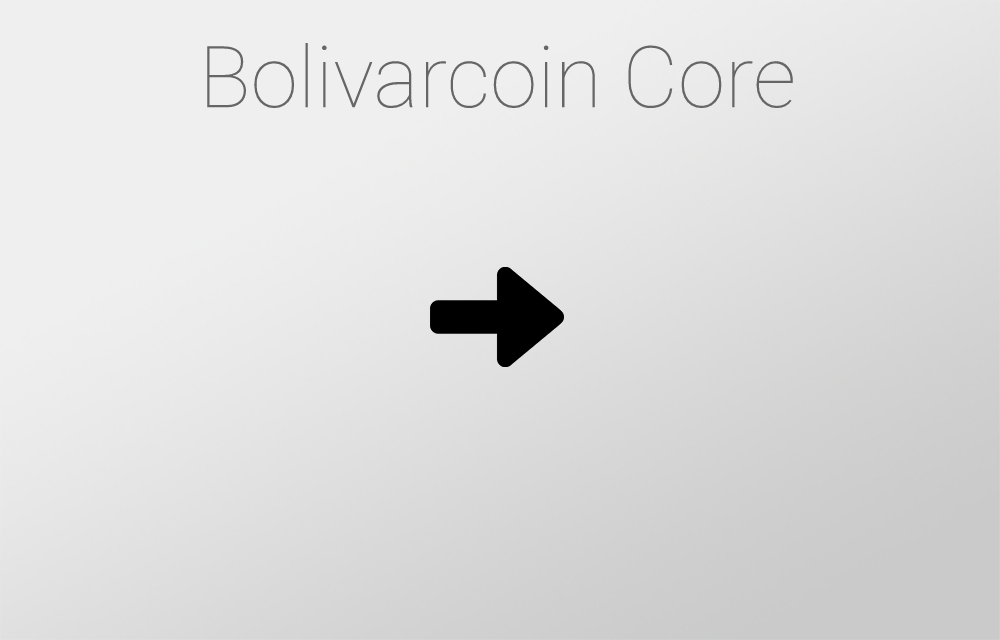
<style>
.page{position:relative;width:1000px;height:640px}
.page>*{position:absolute;margin:0}
.t1{font:85.7px "HelveticaNeue-Thin";color:#666666}
</style>
<div class="page">
<p class="t1" style="left:207px;top:42px;width:586px;height:67px">Bolivarcoin Core</p>
</div>
